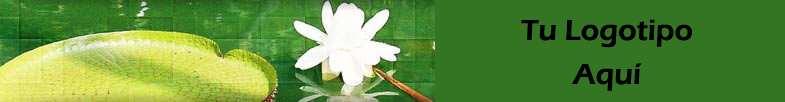
<style>
.page{position:relative;width:785px;height:102px;background:#347523}
.page>*{position:absolute;margin:0}
.t1{font:30px/11px "ErasITC-Demi";color:#000000}
</style>
<div class="page">
<p class="t1" style="left:521px;top:19px;width:171px;height:72px;text-align:center">Tu Logotipo<br><br><br><br>Aquí</p>
</div>
